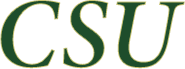
<style>
.page{position:relative;width:185px;height:69px;background:#ffffff}
.page>*{position:absolute;margin:0}
.t1{font:100px "MinionConceptItalic-SemiboldItalic";color:#1e4d2b}
</style>
<div class="page">
<p class="t1" style="left:0px;top:0px;width:185px;height:69px">CSU</p>
</div>
